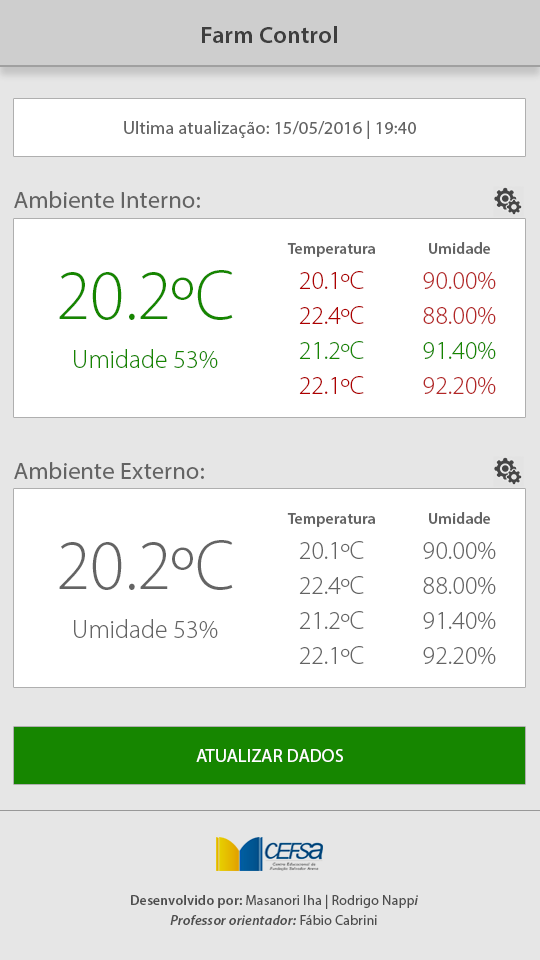
<style>
.page{position:relative;width:540px;height:960px;background:#e6e6e6}
.page>*{position:absolute;margin:0}
.t1{font:23.9px "MyriadPro-Semibold";letter-spacing:0.01em;color:#3e3e3e}
.t2{font:18px "MyriadPro-Regular";letter-spacing:0.01em;color:#646464}
.t3{font:23.9px "MyriadPro-Regular";letter-spacing:0.01em;color:#646464}
.t4{font:25.8px/35px "MyriadPro-Light";letter-spacing:0.005em;color:#ae0000}
.t5{font:16px/35px "MyriadPro-Semibold";letter-spacing:0.005em;color:#646464}
.t6{font:25.8px/35px "MyriadPro-Light";letter-spacing:0.005em;color:#168600}
.t7{font:25.8px/35px "MyriadPro-Light";letter-spacing:0.005em;color:#b42626}
.t8{font:70.6px "MyriadPro-Light";letter-spacing:0.005em;color:#168600}
.t9{font:25.8px "MyriadPro-Light";letter-spacing:0.005em;color:#168600}
.t10{font:25.8px/35px "MyriadPro-Light";letter-spacing:0.005em;color:#646464}
.t11{font:70.6px "MyriadPro-Light";letter-spacing:0.005em;color:#646464}
.t12{font:25.8px "MyriadPro-Light";letter-spacing:0.005em;color:#646464}
.t13{font:18px "MyriadPro-Regular";letter-spacing:0.01em;color:#ffffff}
.t14{font:14px/20px "MyriadPro-Regular";letter-spacing:0.01em;color:#4d4d4d}
.t15{font:14px/20px "MyriadPro-Semibold";letter-spacing:0.01em;color:#4d4d4d}
.t16{font:14px/20px "MyriadPro-SemiboldIt";letter-spacing:0.01em;color:#4d4d4d}
</style>
<div class="page">
<p class="t1" style="left:202px;top:26px;width:135px;height:17px">Farm Control</p>
<p class="t2" style="left:124px;top:120px;width:292px;height:19px">Ultima atualização: 15/05/2016 | 19:40</p>
<p class="t3" style="left:14px;top:191px;width:186px;height:17px">Ambiente Interno:</p>
<p class="t4" style="left:287px;top:243px;width:88px;height:151px;text-align:center"><span class="t5">Temperatura<br></span>20.1ºC<br>22.4ºC<br><span class="t6">21.2ºC<br></span>22.1ºC</p>
<p class="t7" style="left:423px;top:242px;width:73px;height:153px;text-align:center"><span class="t5">Umidade<br></span>90.00%<br>88.00%<br><span class="t6">91.40%<br></span>92.20%</p>
<p class="t8" style="left:59px;top:270px;width:174px;height:50px">20.2ºC</p>
<p class="t9" style="left:74px;top:349px;width:144px;height:20px">Umidade 53%</p>
<p class="t3" style="left:14px;top:462px;width:190px;height:17px">Ambiente Externo:</p>
<p class="t10" style="left:287px;top:513px;width:88px;height:151px;text-align:center"><span class="t5">Temperatura<br></span>20.1ºC<br>22.4ºC<br>21.2ºC<br>22.1ºC</p>
<p class="t10" style="left:423px;top:512px;width:73px;height:153px;text-align:center"><span class="t5">Umidade<br></span>90.00%<br>88.00%<br>91.40%<br>92.20%</p>
<p class="t11" style="left:59px;top:540px;width:174px;height:50px">20.2ºC</p>
<p class="t12" style="left:74px;top:619px;width:144px;height:20px">Umidade 53%</p>
<p class="t13" style="left:196px;top:749px;width:147px;height:13px">ATUALIZAR DADOS</p>
<p class="t14" style="left:131px;top:894px;width:287px;height:31px;text-align:center"><span class="t15">Desenvolvido por: </span>Masanori Iha | Rodrigo Napp<span class="t16">i<br>Professor orientador:</span> Fábio Cabrini</p>
</div>
